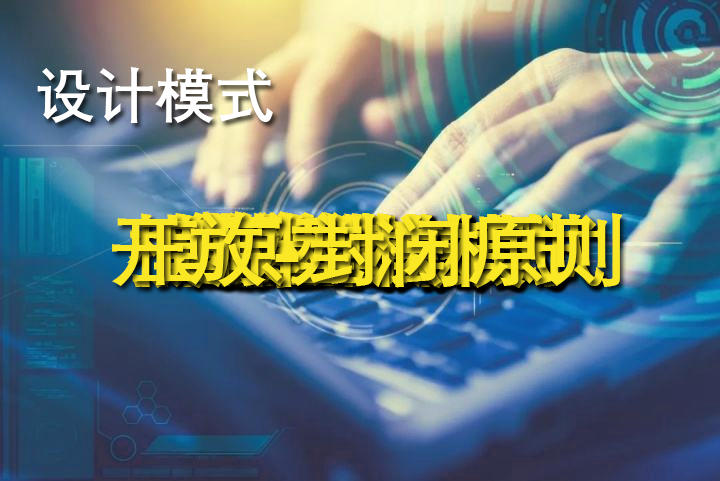
<style>
.page{position:relative;width:720px;height:481px}
.page>*{position:absolute;margin:0}
.t1{font:60px "DengXian-Bold";color:#ffffff}
.t2{font:80px "DengXian-Bold";color:#fae825}
</style>
<div class="page">
<p class="t1" style="left:37px;top:67px;width:236px;height:56px">设计模式</p>
<p class="t2" style="left:112px;top:211px;width:510px;height:76px">开放-封闭原则</p>
</div>
